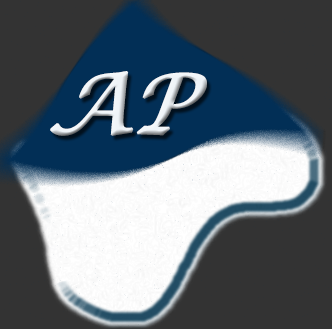
<style>
.page{position:relative;width:332px;height:329px;background:#333333}
.page>*{position:absolute;margin:0}
.t1{font:82px "LucidaCalligraphy-Italic";color:#eef3f7;font-weight:bold;font-style:italic}
</style>
<div class="page">
<p class="t1" style="left:50px;top:71px;width:157px;height:65px">AP</p>
</div>
